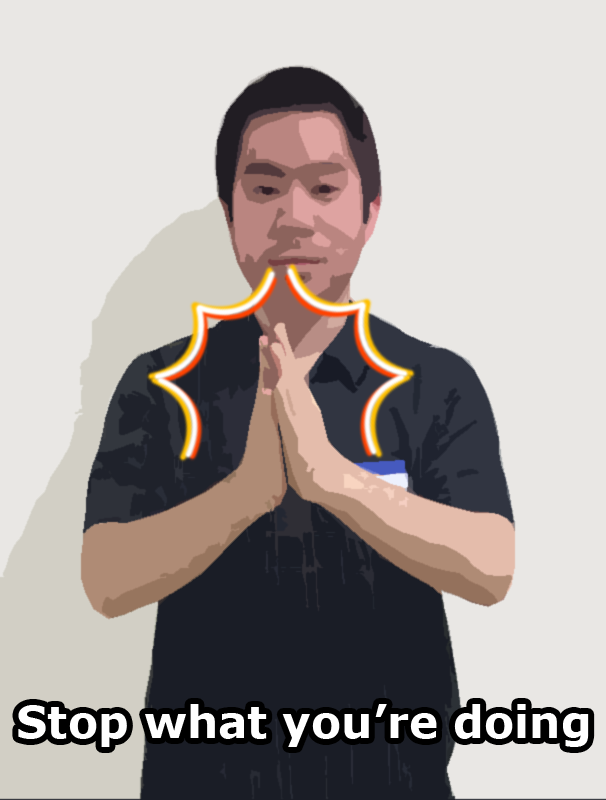
<style>
.page{position:relative;width:606px;height:800px;background:#e9e7e4}
.page>*{position:absolute;margin:0}
.t1{font:44px "Verdana-Bold";color:#ffffff}
</style>
<div class="page">
<p class="t1" style="left:18px;top:704px;width:571px;height:43px">Stop what you’re doing</p>
</div>
